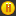
<style>
.page{position:relative;width:16px;height:16px;background:#333333}
.page>*{position:absolute;margin:0}
.t1{font:11.2px "Haettenschweiler";color:#d76d0f;font-weight:bold;scale:1.25 1}
</style>
<div class="page">
<p class="t1" style="left:6px;top:4px;width:5px;height:8px">H</p>
</div>
